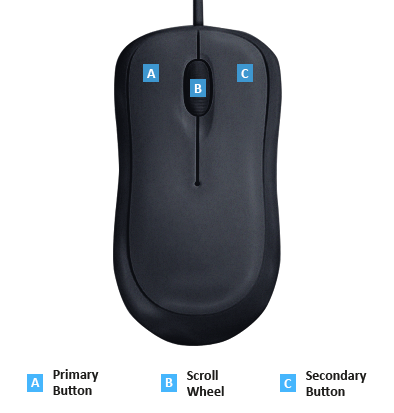
<style>
.page{position:relative;width:394px;height:413px;background:#ffffff}
.page>*{position:absolute;margin:0}
.t1{font:14px "Calibri-Bold";color:#ffffff;text-transform:uppercase}
.t2{font:14px "Calibri-Bold";color:#1d1c1a}
</style>
<div class="page">
<p class="t1" style="left:147px;top:69px;width:9px;height:9px">A</p>
<p class="t1" style="left:241px;top:69px;width:8px;height:9px">C</p>
<p class="t1" style="left:194px;top:84px;width:8px;height:9px">B</p>
<p class="t2" style="left:53px;top:369px;width:46px;height:26px">Primary <br>Button</p>
<p class="t2" style="left:187px;top:370px;width:37px;height:26px">Scroll<br>Wheel</p>
<p class="t2" style="left:306px;top:370px;width:61px;height:26px">Secondary <br>Button</p>
<p class="t1" style="left:31px;top:378px;width:9px;height:9px">A</p>
<p class="t1" style="left:165px;top:378px;width:8px;height:9px">B</p>
<p class="t1" style="left:284px;top:379px;width:8px;height:9px">C</p>
</div>
